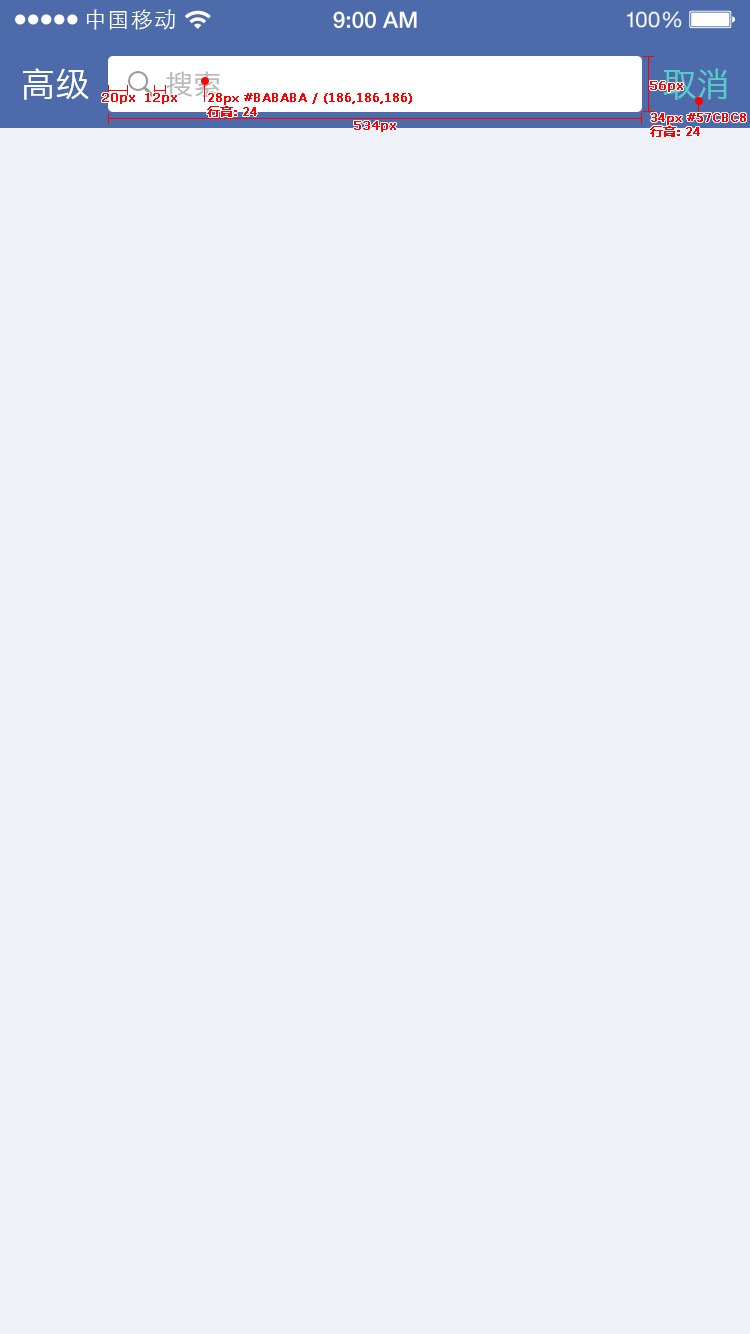
<style>
.page{position:relative;width:750px;height:1334px;background:#eef1f6}
.page>*{position:absolute;margin:0}
.t1{font:21.9px "STXihei";letter-spacing:0.04em;color:#ffffff}
.t2{font:34px "HiraginoSansGB-W3";color:#ffffff}
.t3{font:28px "HiraginoSansGB-W3";color:#bababa}
.t4{font:34px "HiraginoSansGB-W3";color:#57cbc8}
.t5{font:12px "Verdana";color:#ff0000;font-weight:bold}
.t6{font:12px "MicrosoftYaHei";color:#ff0000;font-weight:bold}
</style>
<div class="page">
<p class="t1" style="left:86px;top:9px;width:89px;height:21px">中国移动</p>
<p class="t2" style="left:23px;top:68px;width:66px;height:32px">高级</p>
<p class="t3" style="left:166px;top:71px;width:54px;height:26px">搜索</p>
<p class="t4" style="left:663px;top:68px;width:64px;height:32px">取消</p>
<p class="t5" style="left:650px;top:81px;width:33px;height:11px">56px</p>
<p class="t5" style="left:102px;top:93px;width:33px;height:11px">20px</p>
<p class="t5" style="left:145px;top:93px;width:32px;height:11px">12px</p>
<p class="t6" style="left:207px;top:93px;width:205px;height:24px">28px #BABABA / (186,186,186)<br>行高: 24</p>
<p class="t5" style="left:354px;top:121px;width:42px;height:11px">534px</p>
</div>
